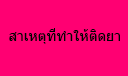
<style>
.page{position:relative;width:128px;height:76px;background:#ff0072}
.page>*{position:absolute;margin:0}
.t1{font:14px "Tahoma";color:#000203}
</style>
<div class="page">
<p class="t1" style="left:9px;top:28px;width:111px;height:16px">สาเหตุที่ทำให้ติดยา</p>
</div>
